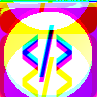
<style>
.page{position:relative;width:97px;height:97px;background:#ffffff}
.page>*{position:absolute;margin:0}
.t1{font:59.1px "YandexSansText-Bold";scale:0.6 1}
</style>
<div class="page">
<p class="t1" style="left:22px;top:23px;width:50px;height:52px">&lt;/&gt;</p>
</div>
